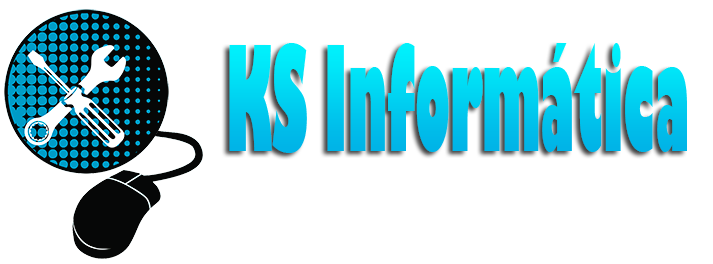
<style>
.page{position:relative;width:713px;height:264px;background:#ffffff}
.page>*{position:absolute;margin:0}
.t1{font:142.1px "GillSans-UltraBold";scale:0.35 1}
</style>
<div class="page">
<p class="t1" style="left:229px;top:43px;width:458px;height:110px">KS Informática</p>
</div>
